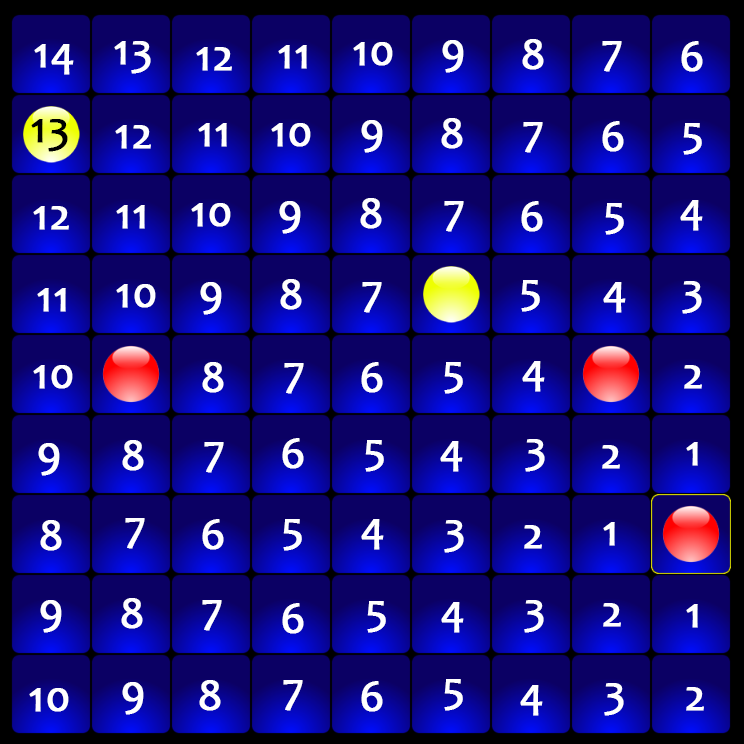
<style>
.page{position:relative;width:744px;height:744px;background:#0b0064}
.page>*{position:absolute;margin:0}
.t1{font:45px "Candara";color:#ffffff;font-weight:bold}
.t2{font:45px "Candara";color:#000000;font-weight:bold}
</style>
<div class="page">
<p class="t1" style="left:114px;top:41px;width:37px;height:33px">13</p>
<p class="t1" style="left:442px;top:40px;width:22px;height:33px">9</p>
<p class="t1" style="left:522px;top:39px;width:22px;height:31px">8</p>
<p class="t1" style="left:602px;top:41px;width:20px;height:31px">7</p>
<p class="t1" style="left:681px;top:41px;width:22px;height:31px">6</p>
<p class="t1" style="left:34px;top:44px;width:40px;height:31px">14</p>
<p class="t1" style="left:196px;top:47px;width:36px;height:24px">12</p>
<p class="t1" style="left:278px;top:45px;width:29px;height:24px">11</p>
<p class="t1" style="left:353px;top:42px;width:40px;height:24px">10</p>
<p class="t2" style="left:31px;top:119px;width:37px;height:33px">13</p>
<p class="t1" style="left:115px;top:125px;width:36px;height:24px">12</p>
<p class="t1" style="left:198px;top:123px;width:29px;height:24px">11</p>
<p class="t1" style="left:271px;top:123px;width:40px;height:24px">10</p>
<p class="t1" style="left:361px;top:120px;width:22px;height:33px">9</p>
<p class="t1" style="left:441px;top:118px;width:22px;height:31px">8</p>
<p class="t1" style="left:523px;top:122px;width:20px;height:31px">7</p>
<p class="t1" style="left:602px;top:121px;width:22px;height:31px">6</p>
<p class="t1" style="left:683px;top:123px;width:19px;height:32px">5</p>
<p class="t1" style="left:360px;top:198px;width:22px;height:31px">8</p>
<p class="t1" style="left:33px;top:206px;width:36px;height:24px">12</p>
<p class="t1" style="left:116px;top:205px;width:29px;height:24px">11</p>
<p class="t1" style="left:191px;top:203px;width:40px;height:24px">10</p>
<p class="t1" style="left:279px;top:201px;width:22px;height:33px">9</p>
<p class="t1" style="left:444px;top:201px;width:20px;height:31px">7</p>
<p class="t1" style="left:521px;top:201px;width:22px;height:31px">6</p>
<p class="t1" style="left:605px;top:203px;width:19px;height:32px">5</p>
<p class="t1" style="left:680px;top:200px;width:23px;height:31px">4</p>
<p class="t1" style="left:280px;top:279px;width:22px;height:31px">8</p>
<p class="t1" style="left:521px;top:280px;width:19px;height:32px">5</p>
<p class="t1" style="left:682px;top:281px;width:20px;height:33px">3</p>
<p class="t1" style="left:37px;top:288px;width:29px;height:24px">11</p>
<p class="t1" style="left:116px;top:284px;width:40px;height:24px">10</p>
<p class="t1" style="left:200px;top:282px;width:22px;height:33px">9</p>
<p class="t1" style="left:362px;top:282px;width:20px;height:31px">7</p>
<p class="t1" style="left:603px;top:282px;width:23px;height:31px">4</p>
<p class="t1" style="left:33px;top:365px;width:40px;height:24px">10</p>
<p class="t1" style="left:202px;top:362px;width:22px;height:31px">8</p>
<p class="t1" style="left:284px;top:363px;width:20px;height:31px">7</p>
<p class="t1" style="left:361px;top:362px;width:22px;height:31px">6</p>
<p class="t1" style="left:444px;top:362px;width:19px;height:32px">5</p>
<p class="t1" style="left:522px;top:361px;width:23px;height:31px">4</p>
<p class="t1" style="left:684px;top:365px;width:18px;height:24px">2</p>
<p class="t1" style="left:282px;top:438px;width:22px;height:31px">6</p>
<p class="t1" style="left:38px;top:443px;width:22px;height:33px">9</p>
<p class="t1" style="left:122px;top:440px;width:22px;height:31px">8</p>
<p class="t1" style="left:204px;top:442px;width:20px;height:31px">7</p>
<p class="t1" style="left:365px;top:440px;width:19px;height:32px">5</p>
<p class="t1" style="left:440px;top:441px;width:23px;height:31px">4</p>
<p class="t1" style="left:525px;top:439px;width:20px;height:33px">3</p>
<p class="t1" style="left:602px;top:445px;width:18px;height:24px">2</p>
<p class="t1" style="left:686px;top:442px;width:12px;height:24px">1</p>
<p class="t1" style="left:40px;top:520px;width:22px;height:31px">8</p>
<p class="t1" style="left:125px;top:518px;width:20px;height:31px">7</p>
<p class="t1" style="left:202px;top:519px;width:22px;height:31px">6</p>
<p class="t1" style="left:283px;top:519px;width:19px;height:32px">5</p>
<p class="t1" style="left:361px;top:519px;width:23px;height:31px">4</p>
<p class="t1" style="left:444px;top:520px;width:20px;height:33px">3</p>
<p class="t1" style="left:524px;top:525px;width:18px;height:24px">2</p>
<p class="t1" style="left:603px;top:522px;width:12px;height:24px">1</p>
<p class="t1" style="left:40px;top:600px;width:22px;height:33px">9</p>
<p class="t1" style="left:121px;top:598px;width:22px;height:31px">8</p>
<p class="t1" style="left:202px;top:600px;width:20px;height:31px">7</p>
<p class="t1" style="left:282px;top:603px;width:22px;height:31px">6</p>
<p class="t1" style="left:367px;top:601px;width:19px;height:32px">5</p>
<p class="t1" style="left:441px;top:602px;width:23px;height:31px">4</p>
<p class="t1" style="left:524px;top:600px;width:20px;height:33px">3</p>
<p class="t1" style="left:603px;top:603px;width:18px;height:24px">2</p>
<p class="t1" style="left:686px;top:604px;width:12px;height:24px">1</p>
<p class="t1" style="left:29px;top:688px;width:40px;height:24px">10</p>
<p class="t1" style="left:122px;top:682px;width:22px;height:33px">9</p>
<p class="t1" style="left:199px;top:680px;width:22px;height:31px">8</p>
<p class="t1" style="left:283px;top:680px;width:20px;height:31px">7</p>
<p class="t1" style="left:361px;top:681px;width:22px;height:31px">6</p>
<p class="t1" style="left:444px;top:679px;width:19px;height:32px">5</p>
<p class="t1" style="left:520px;top:685px;width:23px;height:31px">4</p>
<p class="t1" style="left:604px;top:683px;width:20px;height:33px">3</p>
<p class="t1" style="left:686px;top:687px;width:18px;height:24px">2</p>
</div>
